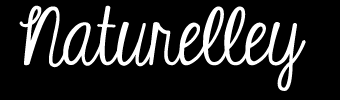
<style>
.page{position:relative;width:340px;height:100px;background:#000000}
.page>*{position:absolute;margin:0}
.t1{font:83.3px "KGEyesWideOpen";color:#ffffff}
</style>
<div class="page">
<p class="t1" style="left:19px;top:5px;width:287px;height:86px">Naturelley</p>
</div>
